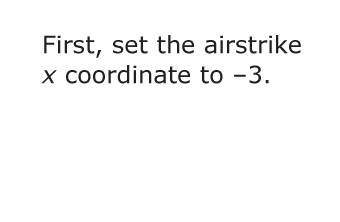
<style>
.page{position:relative;width:340px;height:222px;background:#ffffff}
.page>*{position:absolute;margin:0}
.t1{font:24px/30px "Verdana";color:#202020}
.t2{font:24px/30px "Verdana-Italic";color:#202020}
</style>
<div class="page">
<p class="t1" style="left:41px;top:35px;width:260px;height:49px">First, set the airstrike <span class="t2">x</span> coordinate to –3.</p>
</div>
